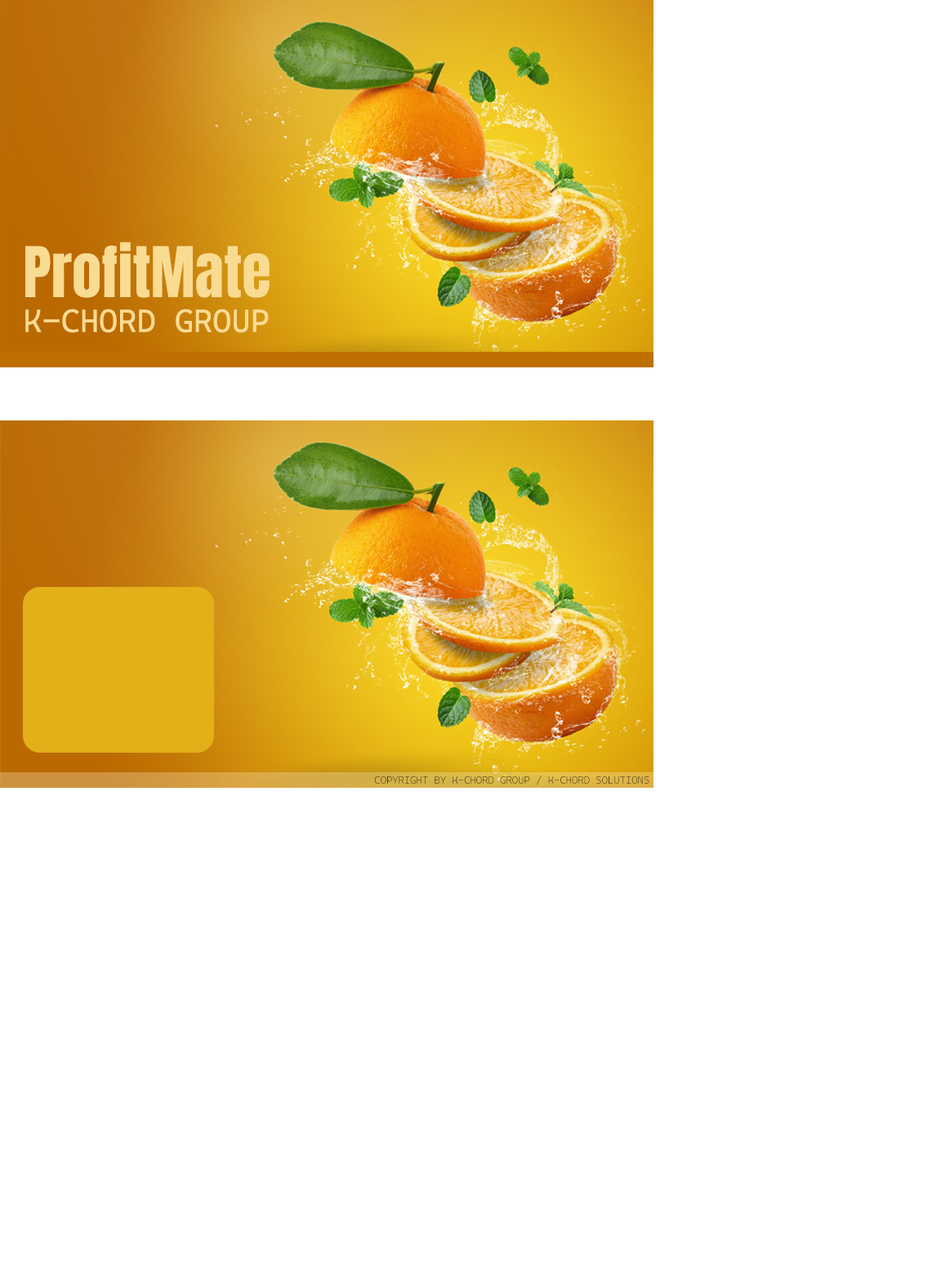
<style>
.page{position:relative;width:941px;height:1267px;background:#ffffff}
.page>*{position:absolute;margin:0}
.t1{font:59.5px "Anton-Regular";color:#fadb92}
.t2{font:32.3px "CascadiaCode-Roman";color:#fadb92;text-transform:uppercase}
.t3{font:10.2px "CascadiaCodeRoman-Bold";text-transform:uppercase}
</style>
<div class="page">
<p class="t1" style="left:25px;top:242px;width:245px;height:56px">ProfitMate</p>
<p class="t2" style="left:25px;top:309px;width:244px;height:24px">K-Chord Group</p>
<p class="t3" style="left:374px;top:776px;width:275px;height:9px">copyright by k-chord group / k-chord solutions</p>
</div>
